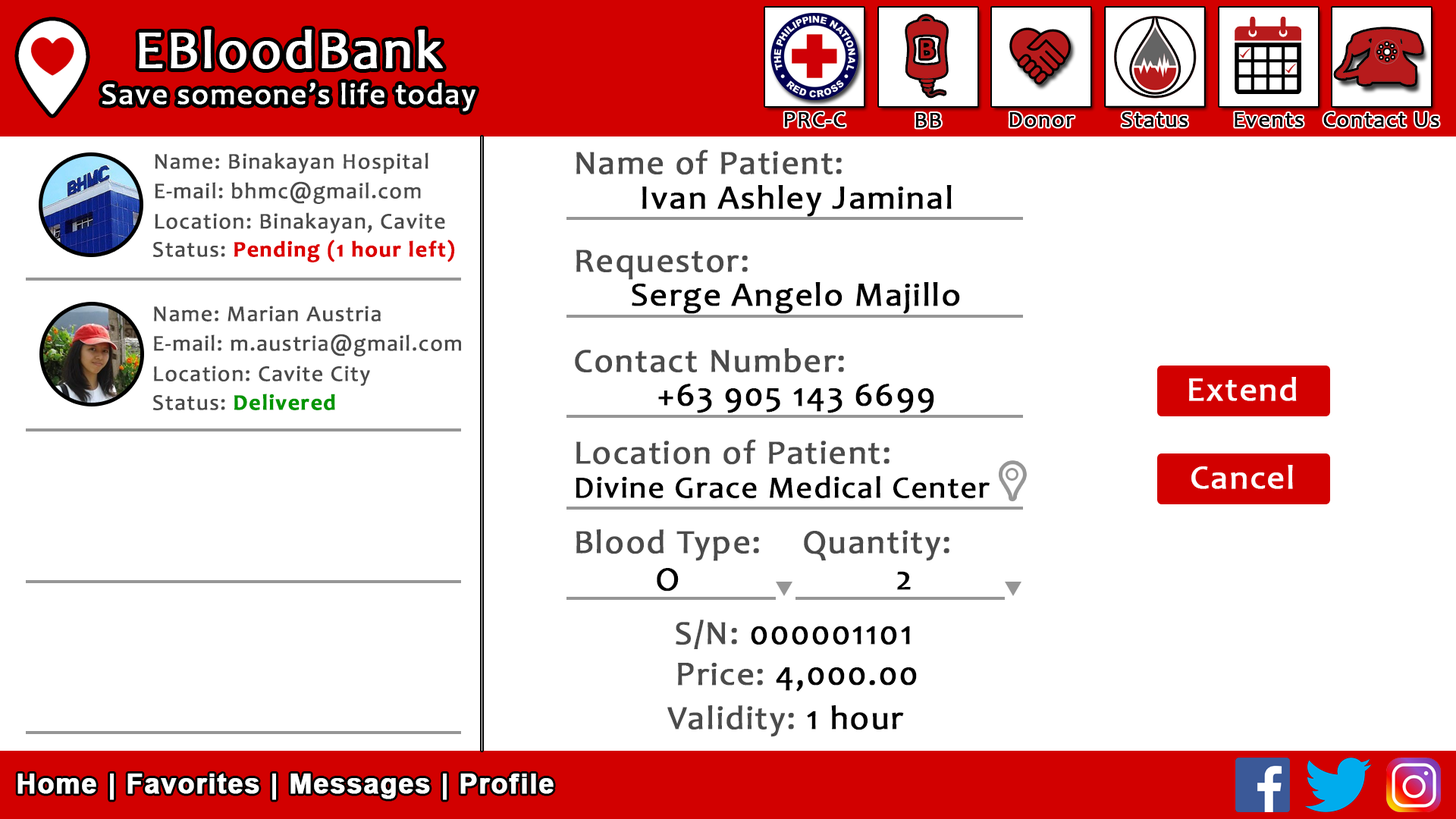
<style>
.page{position:relative;width:1456px;height:819px;background:#ffffff}
.page>*{position:absolute;margin:0}
.t1{font:30.3px "Candara";letter-spacing:0.03em;color:#ffffff;font-weight:bold}
.t2{font:54.6px "Candara";letter-spacing:0.03em;color:#ffffff;font-weight:bold}
.t3{font:22.7px "Candara";letter-spacing:0.03em;color:#000000;font-weight:bold}
.t4{font:33.8px "Candara";letter-spacing:0.03em;color:#4b4b4b;font-weight:bold}
.t5{font:22.5px "Candara";letter-spacing:0.03em;color:#4a4a4a;font-weight:bold}
.t6{font:33.7px "Candara";letter-spacing:0.03em;color:#000000;font-weight:bold}
.t7{font:22.5px "Candara-Bold";letter-spacing:0.03em;color:#dc0000;font-weight:bold}
.t8{font:33.7px "Candara";letter-spacing:0.03em;color:#ffffff;font-weight:bold}
.t9{font:22.5px "Candara-Bold";letter-spacing:0.03em;color:#009600;font-weight:bold}
.t10{font:31px "Candara";letter-spacing:0.03em;color:#000000;font-weight:bold}
.t11{font:33.8px "Candara";letter-spacing:0.03em;color:#000000;font-weight:bold}
.t12{font:33.7px "Candara";letter-spacing:0.03em;color:#4b4b4b;font-weight:bold}
.t13{font:27.3px "Arial-BoldMT";letter-spacing:0.03em;color:#ffffff;font-weight:bold}
</style>
<div class="page">
<p class="t1" style="left:102px;top:30px;width:373px;height:81px;text-align:center"><span class="t2">EBloodBank<br></span>Save someone’s life today</p>
<p class="t3" style="left:784px;top:112px;width:62px;height:15px">PRC-C</p>
<p class="t3" style="left:915px;top:113px;width:26px;height:15px">BB</p>
<p class="t3" style="left:1009px;top:112px;width:66px;height:15px">Donor</p>
<p class="t3" style="left:1122px;top:112px;width:66px;height:15px">Status</p>
<p class="t3" style="left:1235px;top:112px;width:69px;height:15px">Events</p>
<p class="t3" style="left:1323px;top:112px;width:116px;height:15px">Contact Us</p>
<p class="t4" style="left:576px;top:149px;width:266px;height:26px">Name of Patient:</p>
<p class="t5" style="left:155px;top:152px;width:273px;height:22px">Name: Binakayan Hospital</p>
<p class="t5" style="left:155px;top:181px;width:266px;height:23px">E-mail: bhmc@gmail.com</p>
<p class="t6" style="left:642px;top:185px;width:310px;height:32px">Ivan Ashley Jaminal</p>
<p class="t5" style="left:155px;top:212px;width:290px;height:22px">Location: Binakayan, Cavite</p>
<p class="t7" style="left:153px;top:240px;width:302px;height:22px"><span class="t5">Status: </span>Pending (1 hour left)</p>
<p class="t4" style="left:576px;top:249px;width:172px;height:31px">Requestor:</p>
<p class="t6" style="left:632px;top:282px;width:328px;height:32px">Serge Angelo Majillo</p>
<p class="t5" style="left:154px;top:306px;width:227px;height:16px">Name: Marian Austria</p>
<p class="t5" style="left:154px;top:334px;width:307px;height:22px">E-mail: m.austria@gmail.com</p>
<p class="t4" style="left:575px;top:348px;width:269px;height:25px">Contact Number:</p>
<p class="t5" style="left:154px;top:366px;width:216px;height:20px">Location: Cavite City</p>
<p class="t8" style="left:1189px;top:377px;width:108px;height:24px">Extend</p>
<p class="t6" style="left:658px;top:384px;width:276px;height:29px">+63 905 143 6699</p>
<p class="t9" style="left:153px;top:394px;width:182px;height:16px"><span class="t5">Status: </span>Delivered</p>
<p class="t4" style="left:576px;top:439px;width:314px;height:26px">Location of Patient:</p>
<p class="t8" style="left:1191px;top:465px;width:102px;height:24px">Cancel</p>
<p class="t10" style="left:576px;top:475px;width:414px;height:23px">Divine Grace Medical Center</p>
<p class="t4" style="left:576px;top:529px;width:183px;height:32px">Blood Type:</p>
<p class="t4" style="left:804px;top:530px;width:145px;height:31px">Quantity:</p>
<p class="t11" style="left:657px;top:568px;width:22px;height:23px">O</p>
<p class="t11" style="left:897px;top:571px;width:14px;height:19px">2</p>
<p class="t11" style="left:676px;top:620px;width:234px;height:29px"><span class="t4">S/N: </span>000001101</p>
<p class="t6" style="left:678px;top:663px;width:239px;height:29px"><span class="t12">Price: </span>4,000.00</p>
<p class="t4" style="left:667px;top:705px;width:237px;height:32px">Validity: <span class="t11">1 hour</span></p>
<p class="t13" style="left:17px;top:773px;width:537px;height:27px">Home | Favorites | Messages | Profile</p>
</div>
